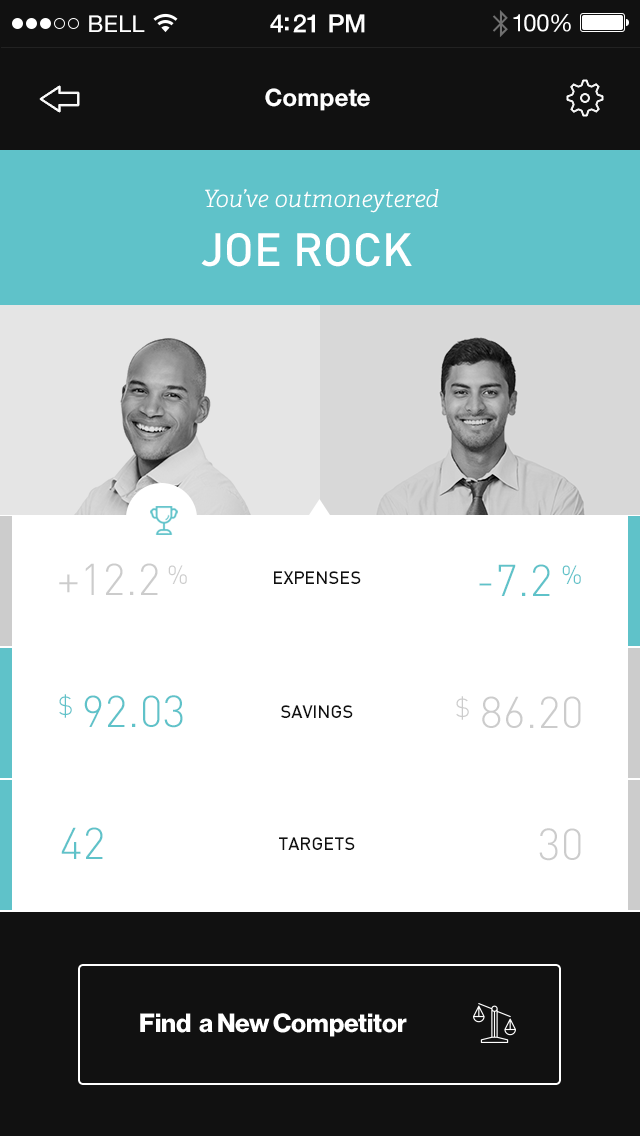
<style>
.page{position:relative;width:640px;height:1136px;background:#ffffff}
.page>*{position:absolute;margin:0}
.t1{font:23px "HelveticaNeue";letter-spacing:0.02em;color:#ffffff}
.t2{font:25px "HelveticaNeue-Medium";letter-spacing:-0.02em;color:#ffffff}
.t3{font:24px "HelveticaNeue";letter-spacing:-0.02em;color:#ffffff}
.t4{font:24px "HelveticaNeue-Bold";color:#ffffff}
.t5{font:24px "Adelle-LightItalic";color:#ffffff}
.t6{font:46px "Dinmed";color:#ffffff;text-transform:uppercase}
.t7{font:44px "Dinlig";color:#cccccc}
.t8{font:26px "Dinlig";color:#cccccc}
.t9{font:44px "Dinlig";color:#5fc2c9}
.t10{font:26px "Dinlig";color:#5fc2c9}
.t11{font:18px "Dinmed";color:#111111;text-transform:uppercase}
.t12{font:25.9px "HaasGrotDisp-75Bold";color:#ffffff}
</style>
<div class="page">
<p class="t1" style="left:89px;top:15px;width:56px;height:17px">BELL</p>
<p class="t2" style="left:270px;top:14px;width:95px;height:19px">4:21 PM</p>
<p class="t3" style="left:513px;top:14px;width:58px;height:18px">100%</p>
<p class="t4" style="left:265px;top:88px;width:105px;height:23px">Compete</p>
<p class="t5" style="left:205px;top:189px;width:234px;height:24px">You’ve outmoneytered</p>
<p class="t6" style="left:201px;top:233px;width:211px;height:34px">Joe Rock</p>
<p class="t7" style="left:59px;top:563px;width:99px;height:32px">+12.2</p>
<p class="t8" style="left:168px;top:565px;width:19px;height:19px">%</p>
<p class="t9" style="left:479px;top:564px;width:71px;height:32px">-7.2</p>
<p class="t10" style="left:562px;top:565px;width:19px;height:19px">%</p>
<p class="t11" style="left:274px;top:571px;width:87px;height:13px">Expenses</p>
<p class="t10" style="left:59px;top:694px;width:13px;height:24px">$</p>
<p class="t9" style="left:84px;top:695px;width:99px;height:33px">92.03</p>
<p class="t8" style="left:456px;top:696px;width:13px;height:24px">$</p>
<p class="t7" style="left:482px;top:696px;width:99px;height:32px">86.20</p>
<p class="t11" style="left:281px;top:705px;width:72px;height:13px">Savings</p>
<p class="t9" style="left:61px;top:827px;width:42px;height:32px">42</p>
<p class="t7" style="left:539px;top:828px;width:42px;height:33px">30</p>
<p class="t11" style="left:279px;top:837px;width:76px;height:13px">Targets</p>
<p class="t12" style="left:140px;top:1013px;width:267px;height:24px">Find  a New Competitor</p>
</div>
